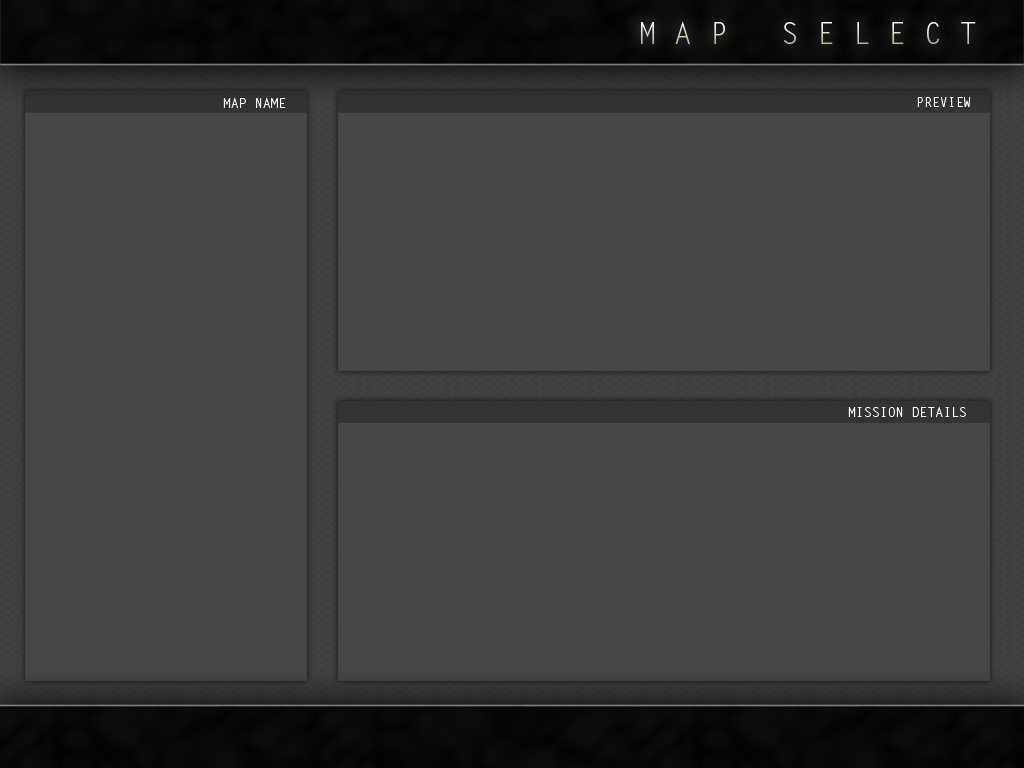
<style>
.page{position:relative;width:1024px;height:768px;background:#474747}
.page>*{position:absolute;margin:0}
.t1{font:29.7px "LetterGothicStd"}
.t2{font:13.2px "LetterGothicStd";color:#ffffff}
</style>
<div class="page">
<p class="t1" style="left:641px;top:21px;width:335px;height:23px">M A P   S E L E C T</p>
<p class="t2" style="left:223px;top:97px;width:63px;height:11px">MAP NAME</p>
<p class="t2" style="left:917px;top:97px;width:54px;height:10px">PREVIEW</p>
<p class="t2" style="left:848px;top:406px;width:118px;height:11px">MISSION DETAILS</p>
</div>
